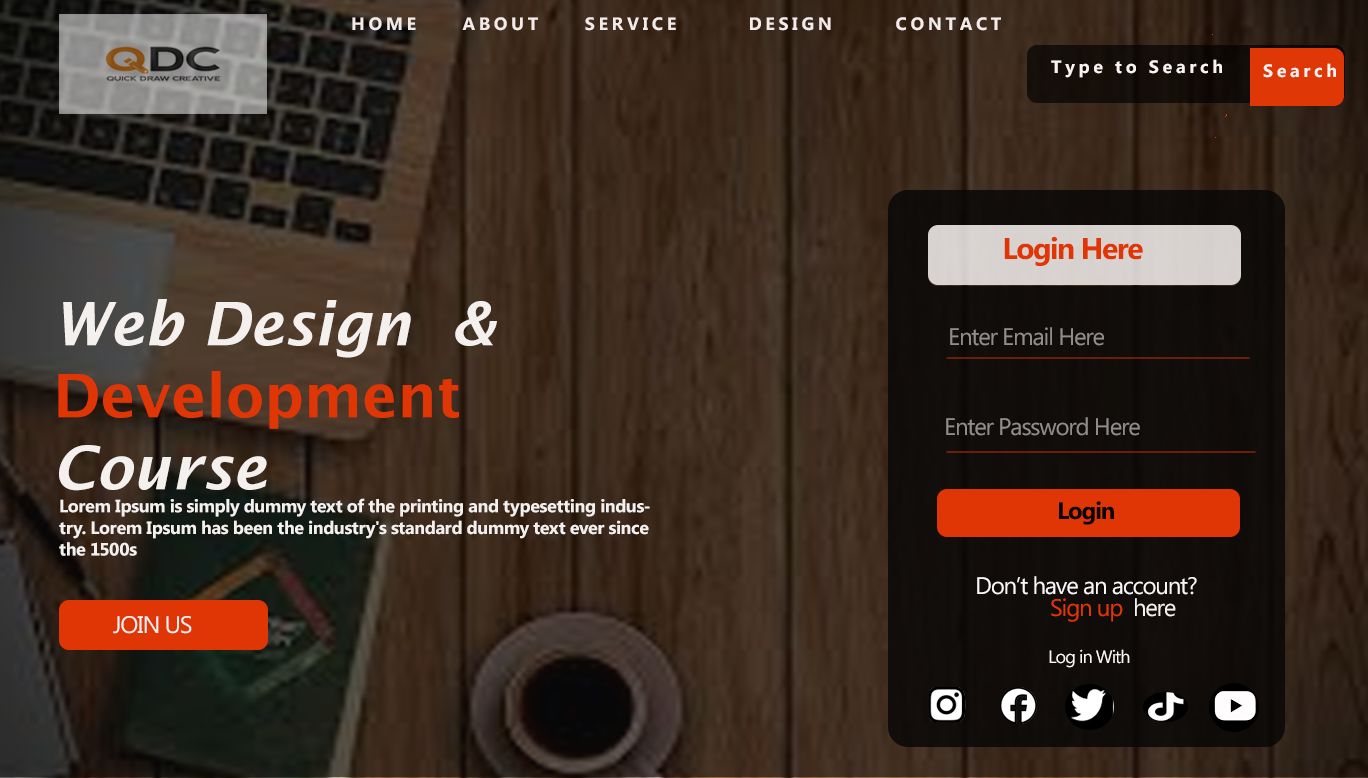
<style>
.page{position:relative;width:1368px;height:778px}
.page>*{position:absolute;margin:0}
.t1{font:18px "MicrosoftPhagsPa-Bold";letter-spacing:0.2em;color:#f4ebe9}
.t2{font:18px "MicrosoftPhagsPa-Bold";letter-spacing:0.2em;color:#f9f4f2}
.t3{font:18px "MicrosoftPhagsPa-Bold";letter-spacing:0.2em;color:#fbf3f0}
.t4{font:30px "MicrosoftPhagsPa-Bold";letter-spacing:-0.05em;color:#e03606}
.t5{font:60px "LucidaSans-DemiItalic";color:#f4f0ee}
.t6{font:60px "LucidaSans-Demi";color:#e03606}
.t7{font:24px "MicrosoftPhagsPa";letter-spacing:-0.05em;color:#908d8b}
.t8{font:18px "MicrosoftPhagsPa-Bold";letter-spacing:-0.025em;color:#f4f0ee}
.t9{font:18px "MicrosoftPhagsPa-Bold";letter-spacing:0.2em;color:#f4f0ee}
.t10{font:24px "MicrosoftPhagsPa-Bold";letter-spacing:-0.05em;color:#090301}
.t11{font:24px "MicrosoftPhagsPa";letter-spacing:-0.05em;color:#f8f6f6}
.t12{font:24px "MicrosoftPhagsPa";letter-spacing:-0.05em;color:#e03606}
.t13{font:24px "MicrosoftPhagsPa";letter-spacing:-0.05em;color:#f4f0ee}
.t14{font:18px "MicrosoftPhagsPa";letter-spacing:-0.05em;color:#fbf6f5}
</style>
<div class="page">
<p class="t1" style="left:352px;top:17px;width:649px;height:14px">HOME     ABOUT     SERVICE        DESIGN       CONTACT</p>
<p class="t2" style="left:1051px;top:59px;width:171px;height:19px">Type to Search</p>
<p class="t3" style="left:1263px;top:63px;width:73px;height:15px">Search</p>
<p class="t4" style="left:1004px;top:236px;width:139px;height:30px">Login Here</p>
<p class="t5" style="left:58px;top:299px;width:439px;height:192px">Web Design  &amp; <span class="t6">Development </span>Course</p>
<p class="t7" style="left:950px;top:327px;width:154px;height:19px">Enter Email Here</p>
<p class="t7" style="left:946px;top:417px;width:194px;height:19px">Enter Password Here</p>
<p class="t8" style="left:59px;top:498px;width:591px;height:58px">Lorem Ipsum is simply dummy text of the printing and typesetting industry. Lorem Ipsum has been the industry's standard dummy text ever since the 1500<span class="t9">s</span></p>
<p class="t10" style="left:1059px;top:501px;width:55px;height:24px">Login</p>
<p class="t11" style="left:977px;top:576px;width:220px;height:19px">Don’t have an account?</p>
<p class="t12" style="left:1051px;top:598px;width:125px;height:24px">Sign up <span class="t13"> here</span></p>
<p class="t13" style="left:113px;top:616px;width:79px;height:18px">JOIN US</p>
<p class="t14" style="left:1049px;top:649px;width:81px;height:19px">Log in With</p>
</div>
